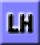
<style>
.page{position:relative;width:40px;height:45px;background:#8080ff}
.page>*{position:absolute;margin:0}
.t1{font:24px "GothicXB-HM"}
</style>
<div class="page">
<p class="t1" style="left:8px;top:14px;width:24px;height:18px">LH</p>
</div>
